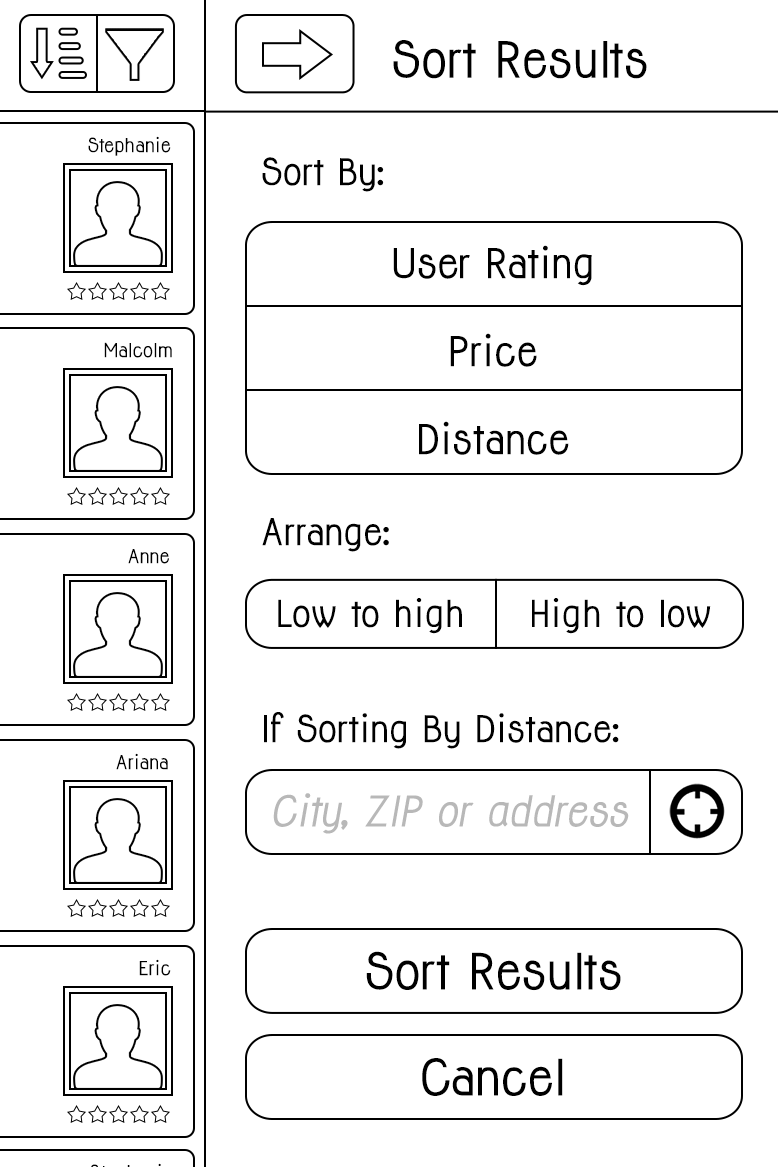
<style>
.page{position:relative;width:778px;height:1167px;background:#ffffff}
.page>*{position:absolute;margin:0}
.t1{font:46.1px "Jolly-Bold";color:#000000}
.t2{font:18px "Jolly-Bold";color:#000000}
.t3{font:34px "Jolly-Bold";color:#000000}
.t4{font:38px/88px "Jolly-Bold";color:#000000}
.t5{font:34.1px "Jolly-Bold";color:#000000}
.t6{font:39.1px "Jolly-BoldItalic";color:#b8b8b8}
.t7{font:46px "Jolly-Bold";color:#000000}
</style>
<div class="page">
<p class="t1" style="left:393px;top:40px;width:254px;height:39px">Sort Results</p>
<p class="t2" style="left:88px;top:136px;width:83px;height:20px">Stephanie</p>
<p class="t3" style="left:262px;top:157px;width:122px;height:35px">Sort By:</p>
<p class="t4" style="left:393px;top:245px;width:199px;height:210px;text-align:center">User Rating<br>Price<br>Distance</p>
<p class="t2" style="left:104px;top:342px;width:68px;height:16px">Malcolm</p>
<p class="t3" style="left:262px;top:518px;width:127px;height:34px">Arrange:</p>
<p class="t2" style="left:128px;top:549px;width:41px;height:15px">Anne</p>
<p class="t5" style="left:278px;top:598px;width:184px;height:36px">Low to high</p>
<p class="t5" style="left:532px;top:598px;width:179px;height:36px">High to low</p>
<p class="t3" style="left:264px;top:712px;width:355px;height:37px">If Sorting By Distance:</p>
<p class="t2" style="left:116px;top:753px;width:52px;height:17px">Ariana</p>
<p class="t6" style="left:273px;top:793px;width:356px;height:41px">City, ZIP or address</p>
<p class="t7" style="left:366px;top:951px;width:255px;height:40px">Sort Results</p>
<p class="t2" style="left:139px;top:959px;width:32px;height:17px">Eric</p>
<p class="t7" style="left:422px;top:1058px;width:141px;height:38px">Cancel</p>
</div>
